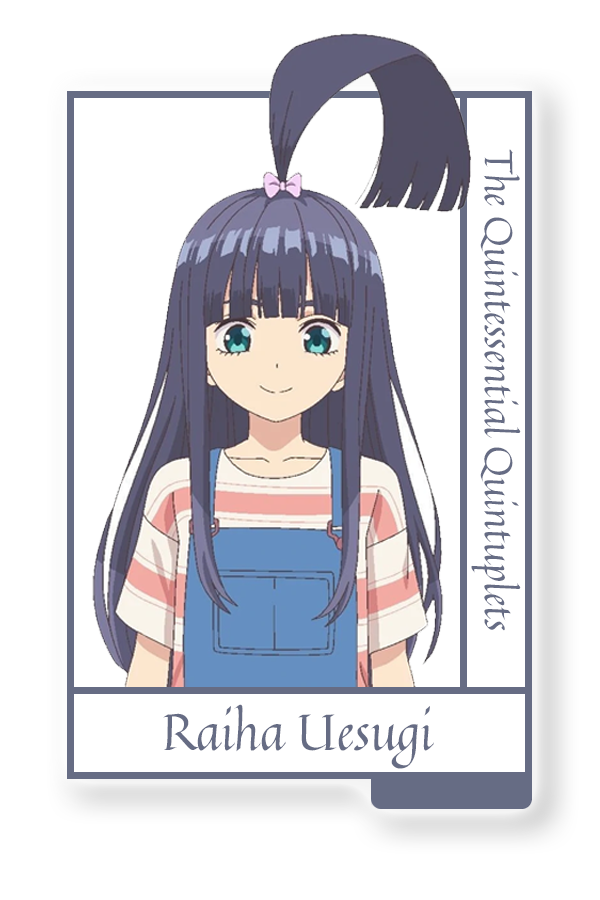
<style>
.page{position:relative;width:600px;height:900px;background:#ffffff}
.page>*{position:absolute;margin:0}
.t1{font:39px "Quintessential-Regular";color:#666c84}
.t2{font:50.5px "Quintessential-Regular";color:#666c84}
</style>
<div class="page">
<p class="t1" style="left:471px;top:149px;width:50px;height:482px;rotate:90deg">The Quintessential Quintuplets</p>
<p class="t2" style="left:163px;top:704px;width:271px;height:65px">Raiha Uesugi</p>
</div>
